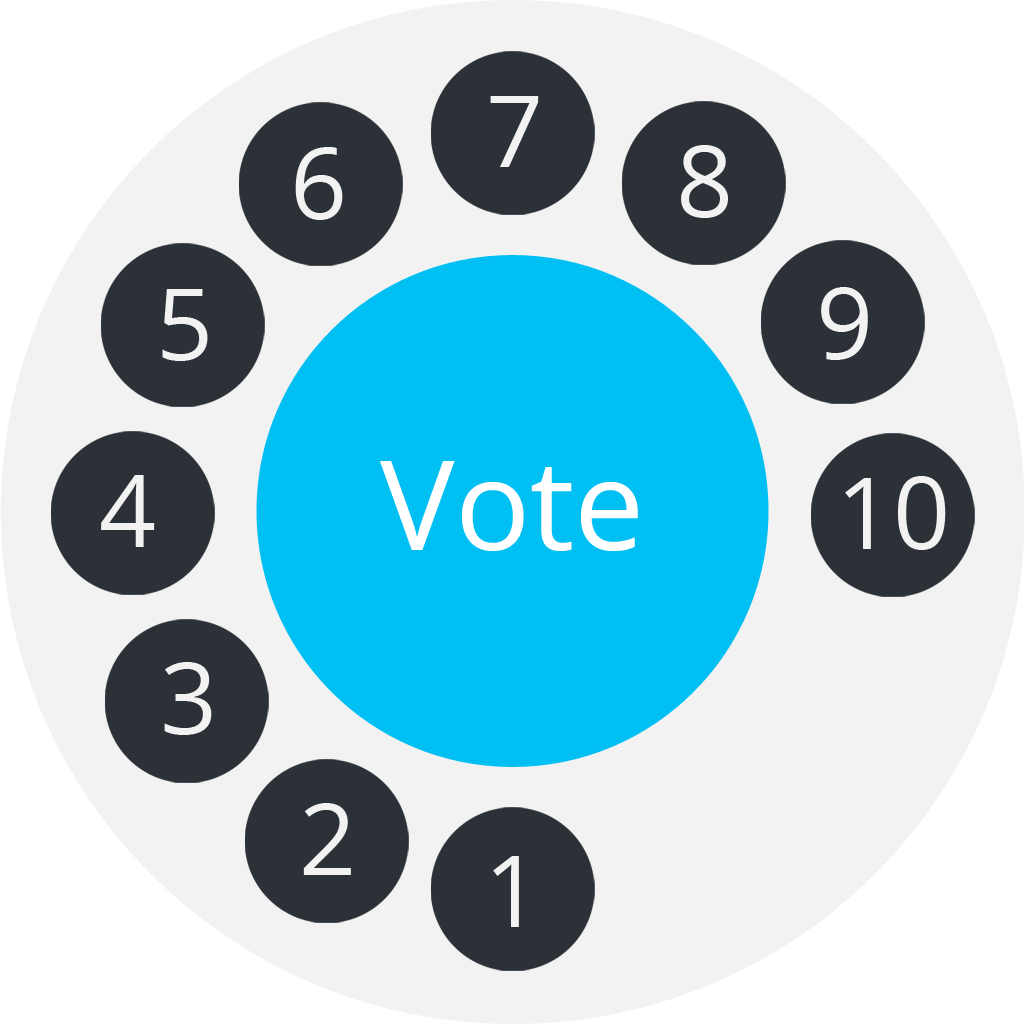
<style>
.page{position:relative;width:1024px;height:1024px;background:#f2f2f2}
.page>*{position:absolute;margin:0}
.t1{font:100px "OpenSans";color:#f2f2f2}
.t2{font:125px "OpenSans";color:#ffffff}
</style>
<div class="page">
<p class="t1" style="left:490px;top:96px;width:49px;height:71px">7</p>
<p class="t1" style="left:295px;top:147px;width:48px;height:73px">6</p>
<p class="t1" style="left:681px;top:145px;width:47px;height:73px">8</p>
<p class="t1" style="left:162px;top:289px;width:46px;height:72px">5</p>
<p class="t1" style="left:821px;top:287px;width:47px;height:73px">9</p>
<p class="t2" style="left:380px;top:461px;width:258px;height:90px">Vote</p>
<p class="t1" style="left:101px;top:475px;width:54px;height:72px">4</p>
<p class="t1" style="left:845px;top:476px;width:101px;height:74px">10</p>
<p class="t1" style="left:164px;top:662px;width:48px;height:73px">3</p>
<p class="t1" style="left:303px;top:803px;width:48px;height:72px">2</p>
<p class="t1" style="left:493px;top:856px;width:26px;height:71px">1</p>
</div>
